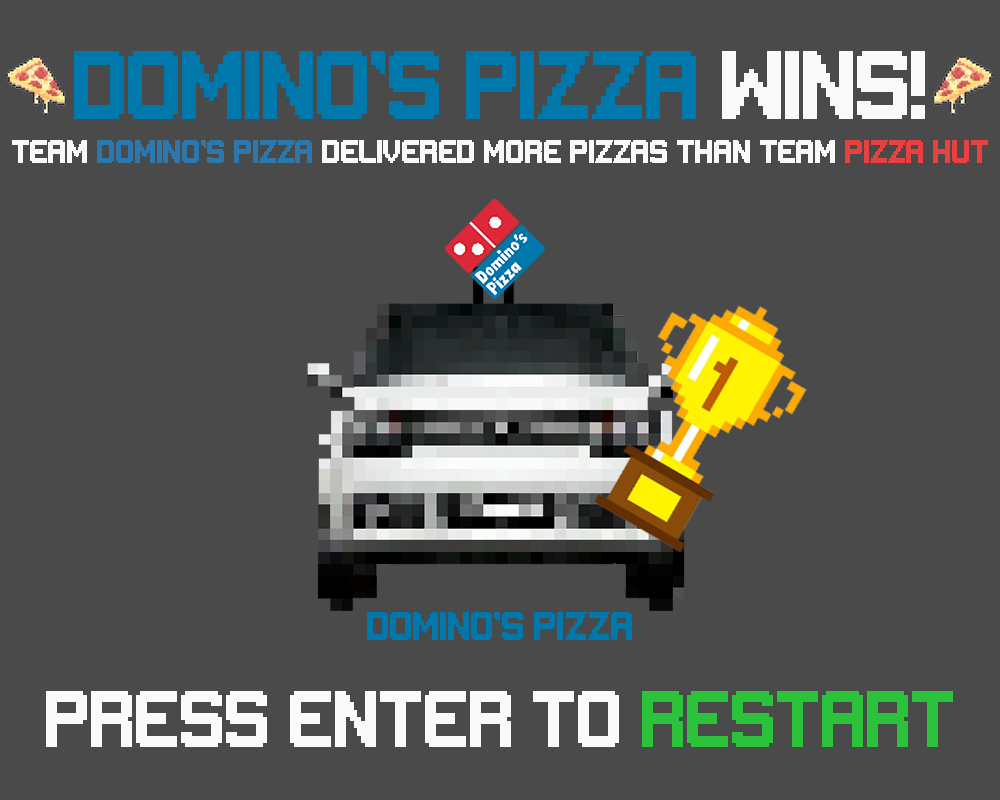
<style>
.page{position:relative;width:1000px;height:800px;background:#4a4a4a}
.page>*{position:absolute;margin:0}
.t1{font:72px "Gameplay";color:#0078ac}
.t2{font:72px "Gameplay";color:#faf9f7}
.t3{font:24px "Gameplay";color:#faf9f7}
.t4{font:24px "Gameplay";color:#2c78ad}
.t5{font:24px "Gameplay";color:#e94040}
.t6{font:30px "Gameplay";color:#0078ac}
.t7{font:60px "Gameplay";color:#fbf9f9}
.t8{font:60px "Gameplay";color:#2cc33b}
</style>
<div class="page">
<p class="t1" style="left:74px;top:51px;width:851px;height:68px">Domino’s Pizza <span class="t2">WIns!</span></p>
<p class="t3" style="left:12px;top:140px;width:976px;height:23px">Team <span class="t4">DOmino’s Pizza </span>delivered more Pizzas than Team <span class="t5">Pizza hut</span></p>
<p class="t6" style="left:367px;top:612px;width:265px;height:28px">Domino’s Pizza</p>
<p class="t7" style="left:46px;top:691px;width:907px;height:56px">Press enter to <span class="t8">restart</span></p>
</div>
